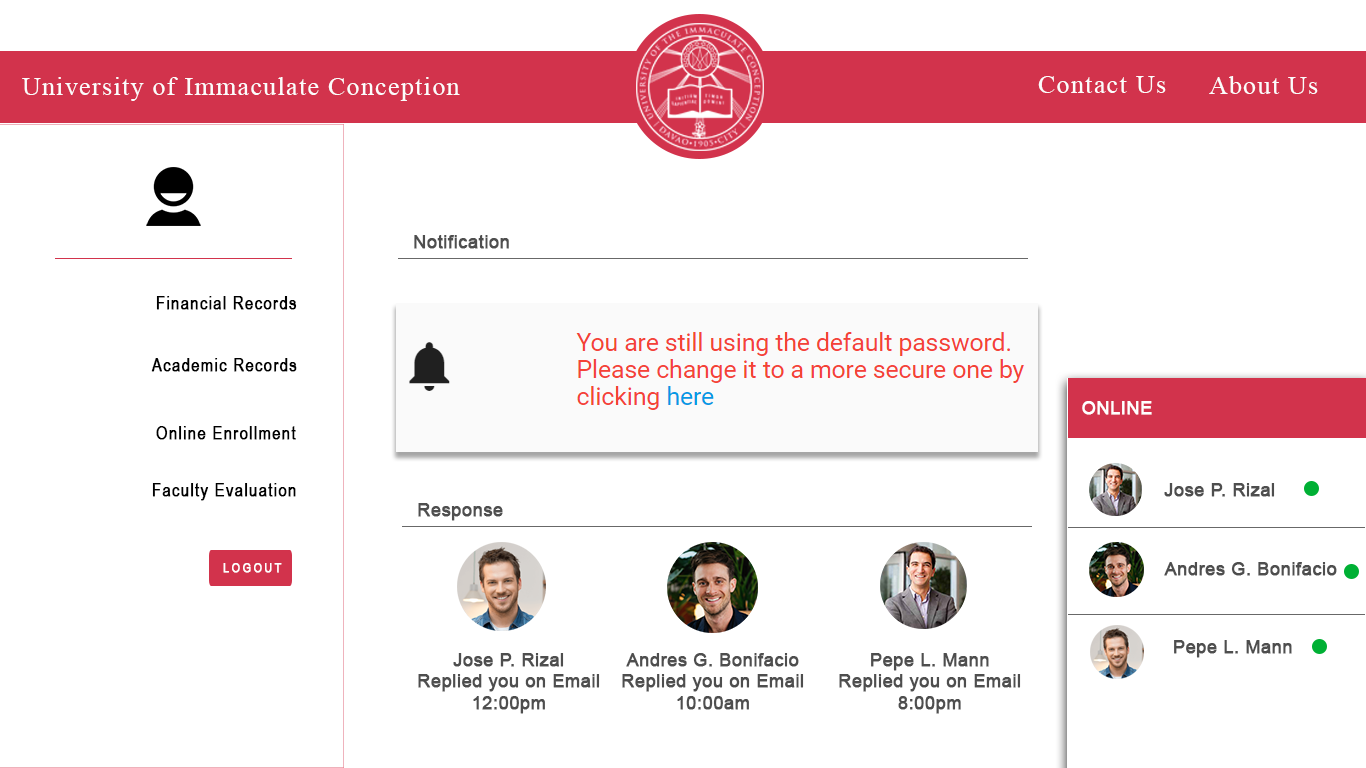
<style>
.page{position:relative;width:1366px;height:768px;background:#ffffff}
.page>*{position:absolute;margin:0}
.t1{font:26px "TimesNewRomanPSMT";letter-spacing:0.05em;color:#fcfcfc}
.t2{font:18px "ArialMT";letter-spacing:0.01em;color:#4e4e4e;font-weight:bold}
.t3{font:18px "ArialNarrow";letter-spacing:0.05em;color:#000000;font-weight:bold}
.t4{font:18px "ArialMT";letter-spacing:0.01em;color:#ffffff;font-weight:bold}
.t5{font:12.7px "ArialNarrow";letter-spacing:0.2em;color:#ffffff;font-weight:bold}
</style>
<div class="page">
<p class="t1" style="left:22px;top:77px;width:438px;height:24px">University of Immaculate Conception</p>
<p class="t1" style="left:1038px;top:76px;width:128px;height:17px">Contact Us</p>
<p class="t1" style="left:1209px;top:76px;width:109px;height:18px">About Us</p>
<p class="t2" style="left:414px;top:235px;width:95px;height:14px">Notification</p>
<p class="t3" style="left:156px;top:296px;width:141px;height:14px">Financial Records</p>
<p class="t3" style="left:151px;top:358px;width:146px;height:14px">Academic Records</p>
<p class="t4" style="left:1082px;top:401px;width:70px;height:14px">ONLINE</p>
<p class="t3" style="left:156px;top:426px;width:140px;height:14px">Online Enrollment</p>
<p class="t3" style="left:152px;top:483px;width:144px;height:18px">Faculty Evaluation</p>
<p class="t2" style="left:1164px;top:483px;width:111px;height:14px">Jose P. Rizal</p>
<p class="t2" style="left:418px;top:503px;width:85px;height:18px">Response</p>
<p class="t5" style="left:223px;top:563px;width:59px;height:10px">LOGOUT</p>
<p class="t2" style="left:1164px;top:562px;width:173px;height:14px">Andres G. Bonifacio</p>
<p class="t2" style="left:1174px;top:640px;width:118px;height:18px">Pepe L. Mann</p>
<p class="t2" style="left:418px;top:653px;width:182px;height:61px;text-align:center">Jose P. Rizal<br>Replied you on Email<br>12:00pm</p>
<p class="t2" style="left:622px;top:653px;width:182px;height:57px;text-align:center">Andres G. Bonifacio<br>Replied you on Email<br>10:00am</p>
<p class="t2" style="left:839px;top:653px;width:182px;height:61px;text-align:center">Pepe L. Mann<br>Replied you on Email<br>8:00pm</p>
</div>
